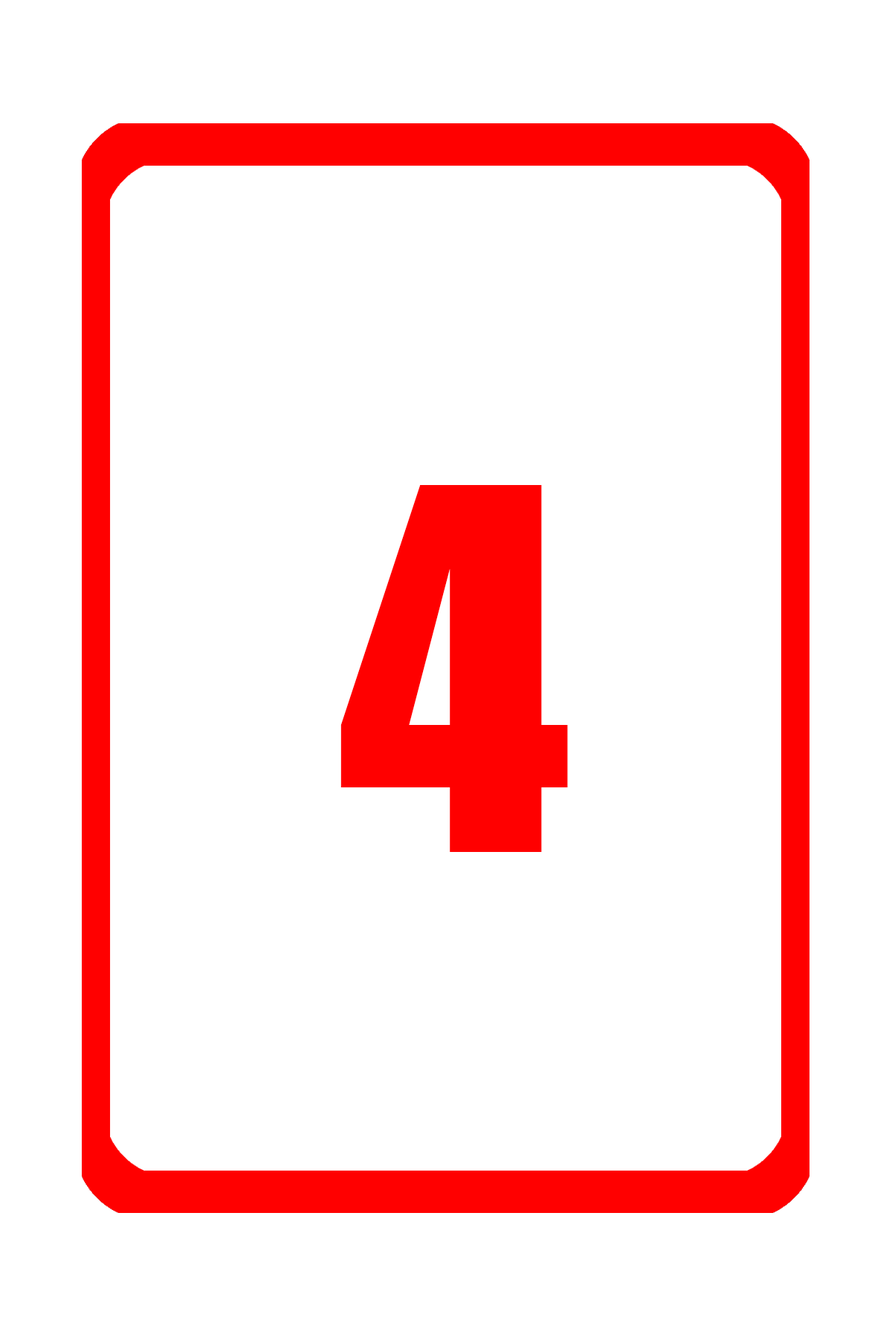
<style>
.page{position:relative;width:892px;height:1337px;background:#ffffff}
.page>*{position:absolute;margin:0}
.t1{font:464.4px "Impact";color:#ff0000}
</style>
<div class="page">
<p class="t1" style="left:340px;top:485px;width:228px;height:367px">4</p>
</div>
